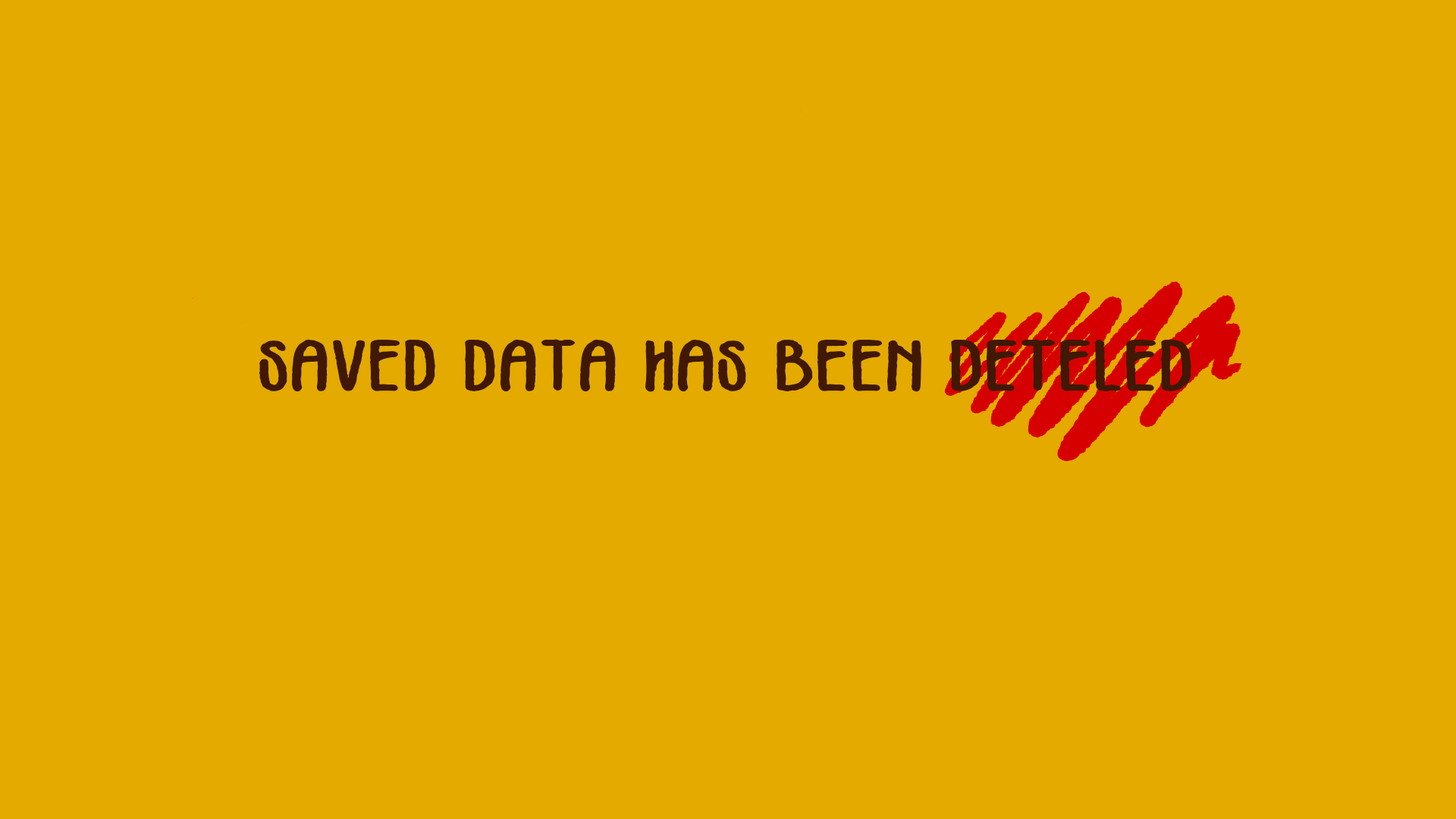
<style>
.page{position:relative;width:1456px;height:819px;background:#e4aa00}
.page>*{position:absolute;margin:0}
.t1{font:73.6px "Vintages";color:#401804;scale:1.46 1}
</style>
<div class="page">
<p class="t1" style="left:259px;top:339px;width:932px;height:53px">SAVED DATA HAS BEEN DETELED</p>
</div>
